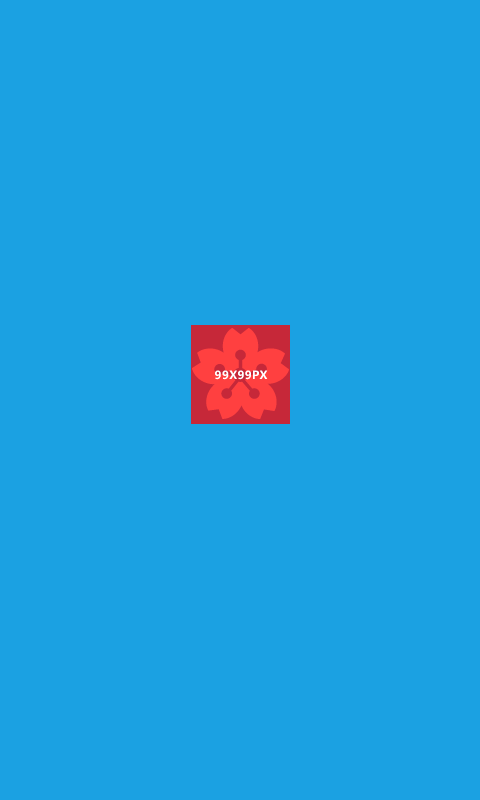
<style>
.page{position:relative;width:480px;height:800px;background:#1ba1e2}
.page>*{position:absolute;margin:0}
.t1{font:12px "SegoeWP-Bold";letter-spacing:0.025em;color:#ffffff;text-transform:uppercase}
</style>
<div class="page">
<p class="t1" style="left:215px;top:370px;width:53px;height:10px">99x99px</p>
</div>
